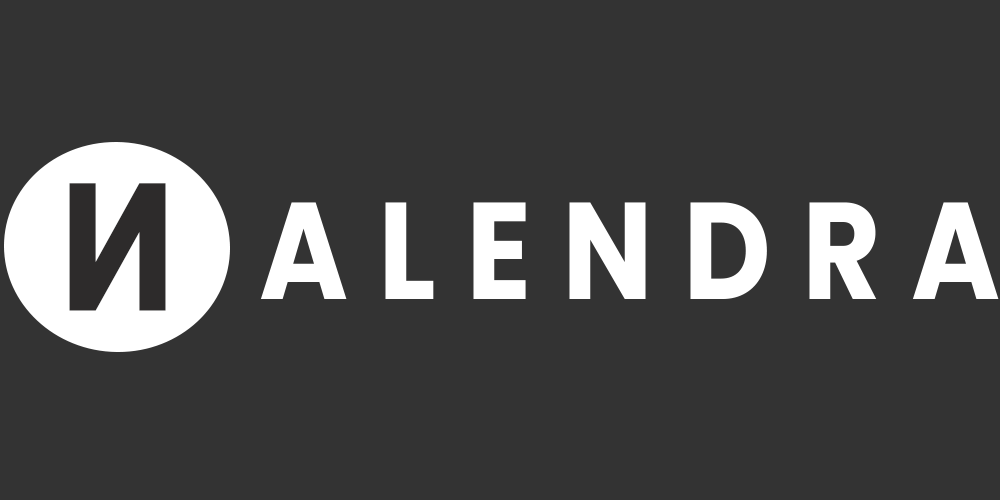
<style>
.page{position:relative;width:1000px;height:500px;background:#333333}
.page>*{position:absolute;margin:0}
.t1{font:181.3px "Poppins-Bold";letter-spacing:0.1em;color:#2d2b2b;scale:0.84 1}
.t2{font:137.6px "Poppins-Bold";letter-spacing:0.25em;color:#ffffff;scale:0.88 1}
</style>
<div class="page">
<p class="t1" style="left:69px;top:183px;width:97px;height:128px;rotate:180deg">N</p>
<p class="t2" style="left:260px;top:202px;width:739px;height:97px">ALENDRA</p>
</div>
